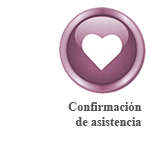
<style>
.page{position:relative;width:150px;height:150px;background:#ffffff}
.page>*{position:absolute;margin:0}
.t1{font:12.5px "TimesNewRomanPS-BoldMT";color:#505050}
</style>
<div class="page">
<p class="t1" style="left:68px;top:102px;width:74px;height:24px;text-align:right">Confirmación<br>de asistencia</p>
</div>
